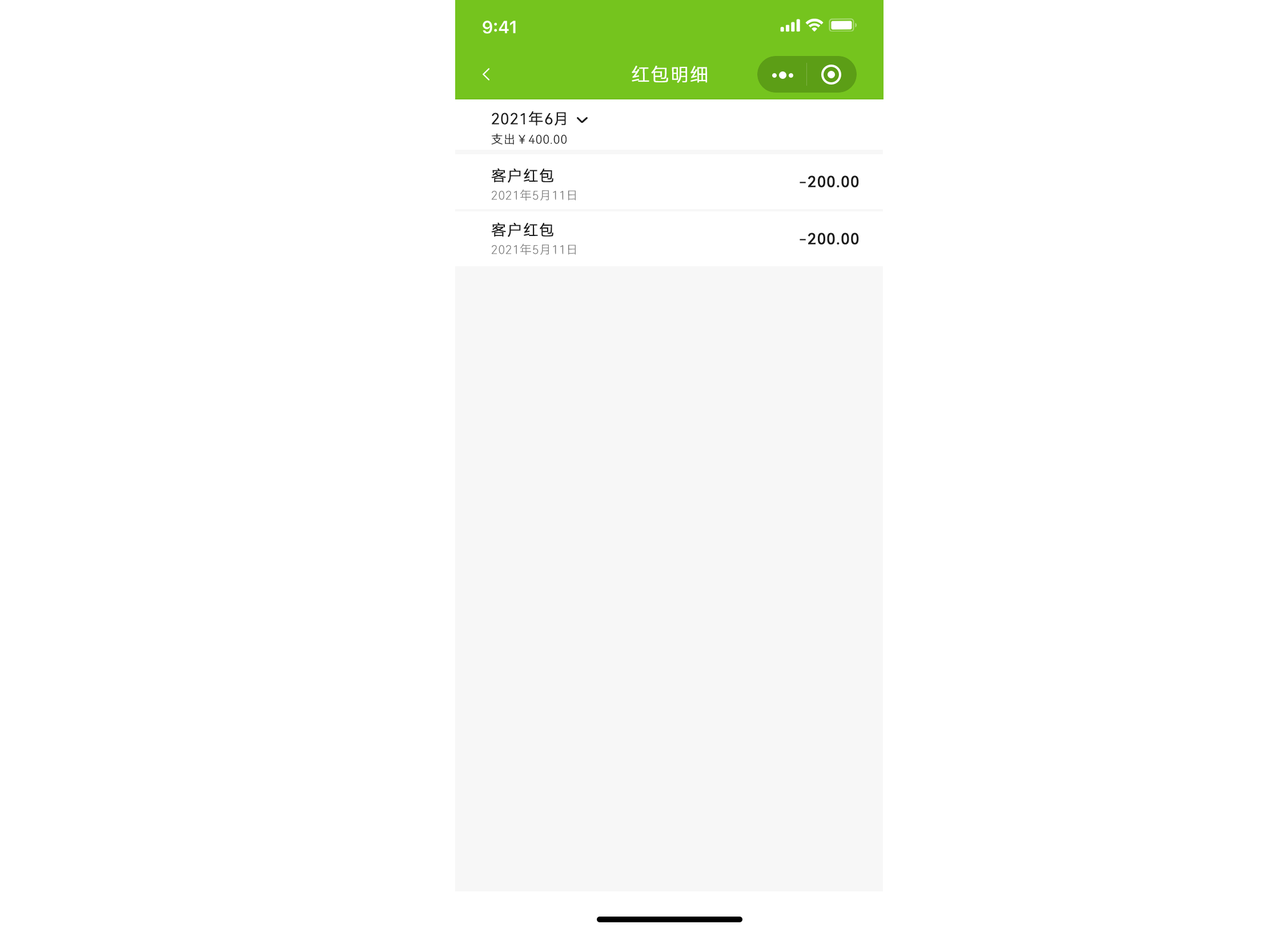
<style>
.page{position:relative;width:1285px;height:928px;background:#ffffff}
.page>*{position:absolute;margin:0}
.t1{font:18.3px "HarmonyOS_Sans_SC_Light";letter-spacing:0.04em;color:#ffffff;text-transform:uppercase;font-weight:bold}
.t2{font:14.9px "HarmonyOS_Sans_SC_Light";letter-spacing:0.04em;color:#1c1c1c;text-transform:uppercase;font-weight:bold}
.t3{font:11.4px "HarmonyOS_Sans_SC_Thin";letter-spacing:0.04em;color:#1c1c1c;text-transform:uppercase;font-weight:bold}
.t4{font:14.9px "HarmonyOS_Sans_SC";letter-spacing:0.04em;color:#1c1c1c;text-transform:uppercase;font-weight:bold}
.t5{font:11.4px "HarmonyOS_Sans_SC_Thin";letter-spacing:0.04em;color:#777777;text-transform:uppercase;font-weight:bold}
</style>
<div class="page">
<p class="t1" style="left:632px;top:65px;width:76px;height:18px">红包明细</p>
<p class="t2" style="left:492px;top:111px;width:74px;height:15px">2021年6月</p>
<p class="t3" style="left:491px;top:133px;width:76px;height:12px">支出￥400.00</p>
<p class="t2" style="left:491px;top:168px;width:63px;height:15px">客户红包</p>
<p class="t4" style="left:800px;top:175px;width:59px;height:12px">-200.00</p>
<p class="t5" style="left:491px;top:189px;width:85px;height:12px">2021年5月11日</p>
<p class="t2" style="left:491px;top:222px;width:63px;height:15px">客户红包</p>
<p class="t4" style="left:800px;top:233px;width:59px;height:11px">-200.00</p>
<p class="t5" style="left:491px;top:243px;width:85px;height:12px">2021年5月11日</p>
</div>
